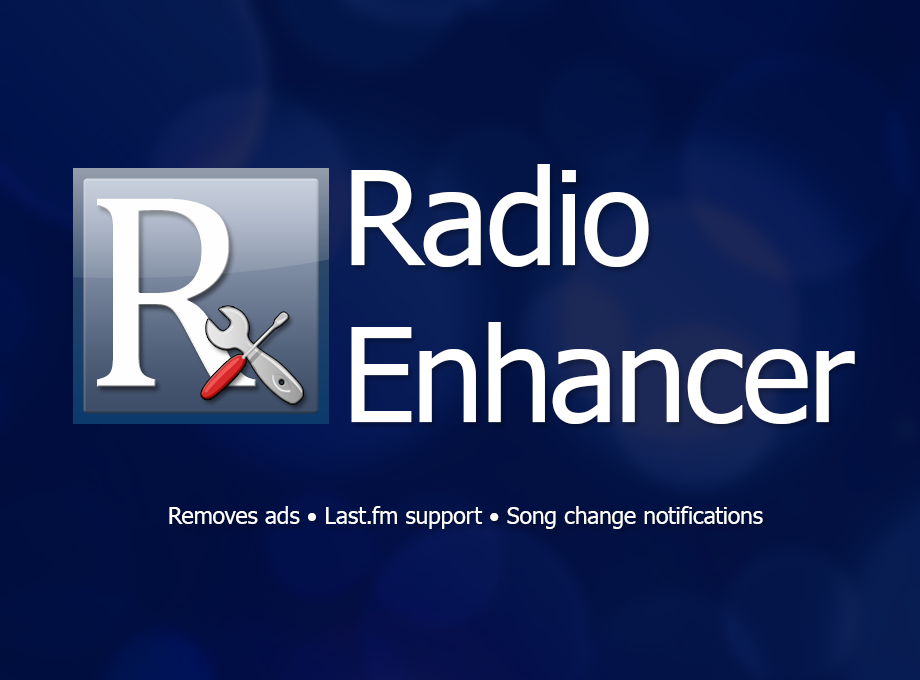
<style>
.page{position:relative;width:920px;height:680px}
.page>*{position:absolute;margin:0}
.t1{font:131px "Tahoma";color:#ffffff}
.t2{font:23px "Tahoma";color:#ffffff}
</style>
<div class="page">
<p class="t1" style="left:351px;top:164px;width:504px;height:260px">Radio<br>Enhancer</p>
<p class="t2" style="left:169px;top:506px;width:594px;height:23px">Removes ads • Last.fm support • Song change notifications</p>
</div>
